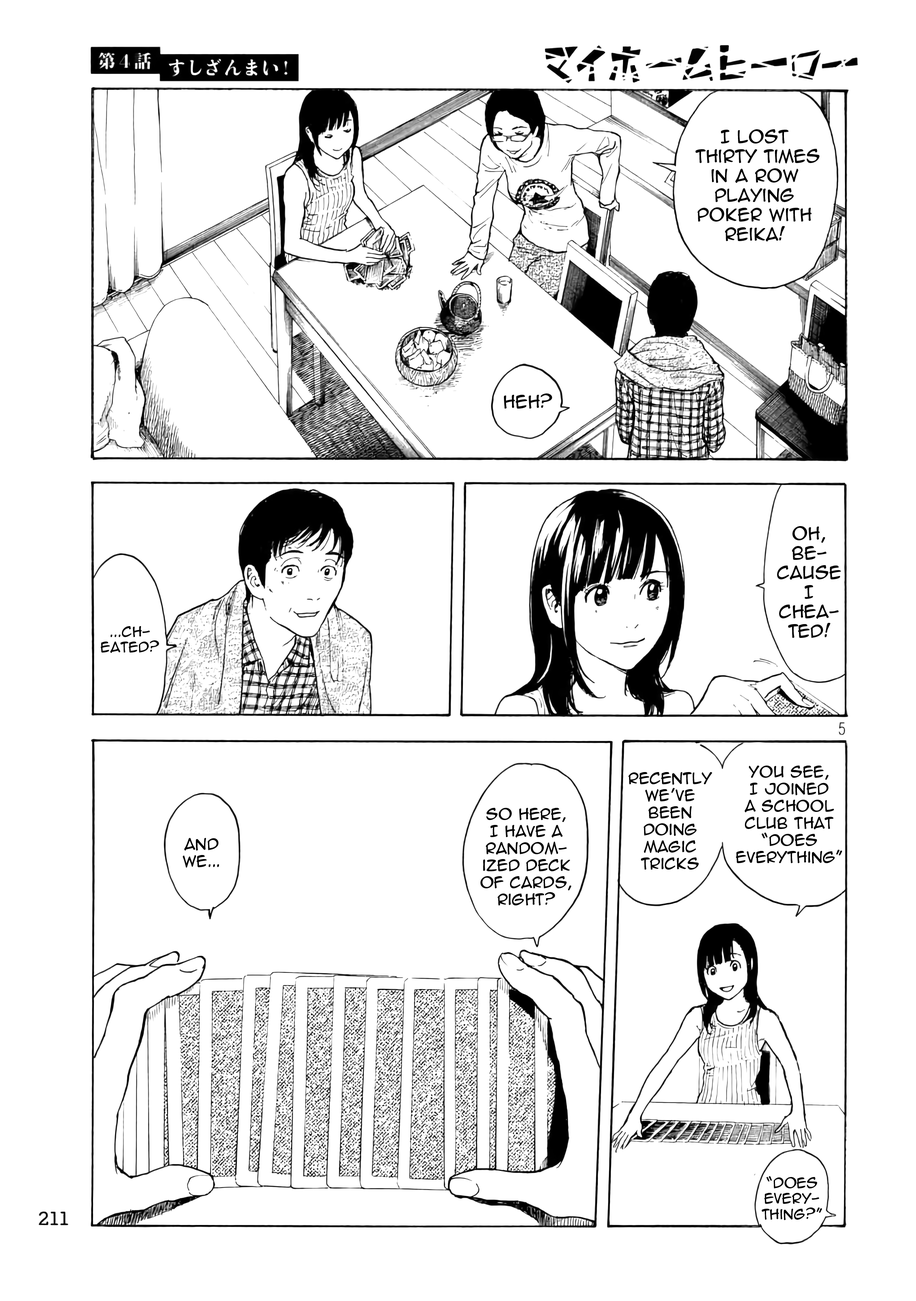
<style>
.page{position:relative;width:916px;height:1301px;background:#ffffff}
.page>*{position:absolute;margin:0}
.t1{font:16.3px "AnimeAce2.0BB";color:#000000}
.t2{font:13px "AnimeAce2.0BB";color:#000000}
.t3{font:14.2px "AnimeAce2.0BB";color:#000000}
</style>
<div class="page">
<p class="t1" style="left:696px;top:129px;width:124px;height:113px;text-align:center">I lost<br> thirty times in a row playing poker with Reika!</p>
<p class="t1" style="left:504px;top:393px;width:49px;height:16px">Heh?</p>
<p class="t1" style="left:777px;top:526px;width:65px;height:112px;text-align:center">Oh, be-<br>cause I chea-<br>ted!</p>
<p class="t2" style="left:101px;top:626px;width:58px;height:27px;text-align:center">...ch-<br>eated?</p>
<p class="t3" style="left:629px;top:772px;width:84px;height:98px;text-align:center">Recently we’ve been doing magic tricks</p>
<p class="t3" style="left:736px;top:766px;width:106px;height:98px;text-align:center">You see, <br>I joined <br>a school club that “does everything”</p>
<p class="t3" style="left:481px;top:808px;width:91px;height:97px;text-align:center">So here, <br>I have a random-<br>ized deck of cards, right?</p>
<p class="t3" style="left:183px;top:838px;width:36px;height:30px;text-align:center">And <br>we...</p>
<p class="t2" style="left:762px;top:1176px;width:61px;height:44px;text-align:center">“Does every-<br>thing?”</p>
</div>
